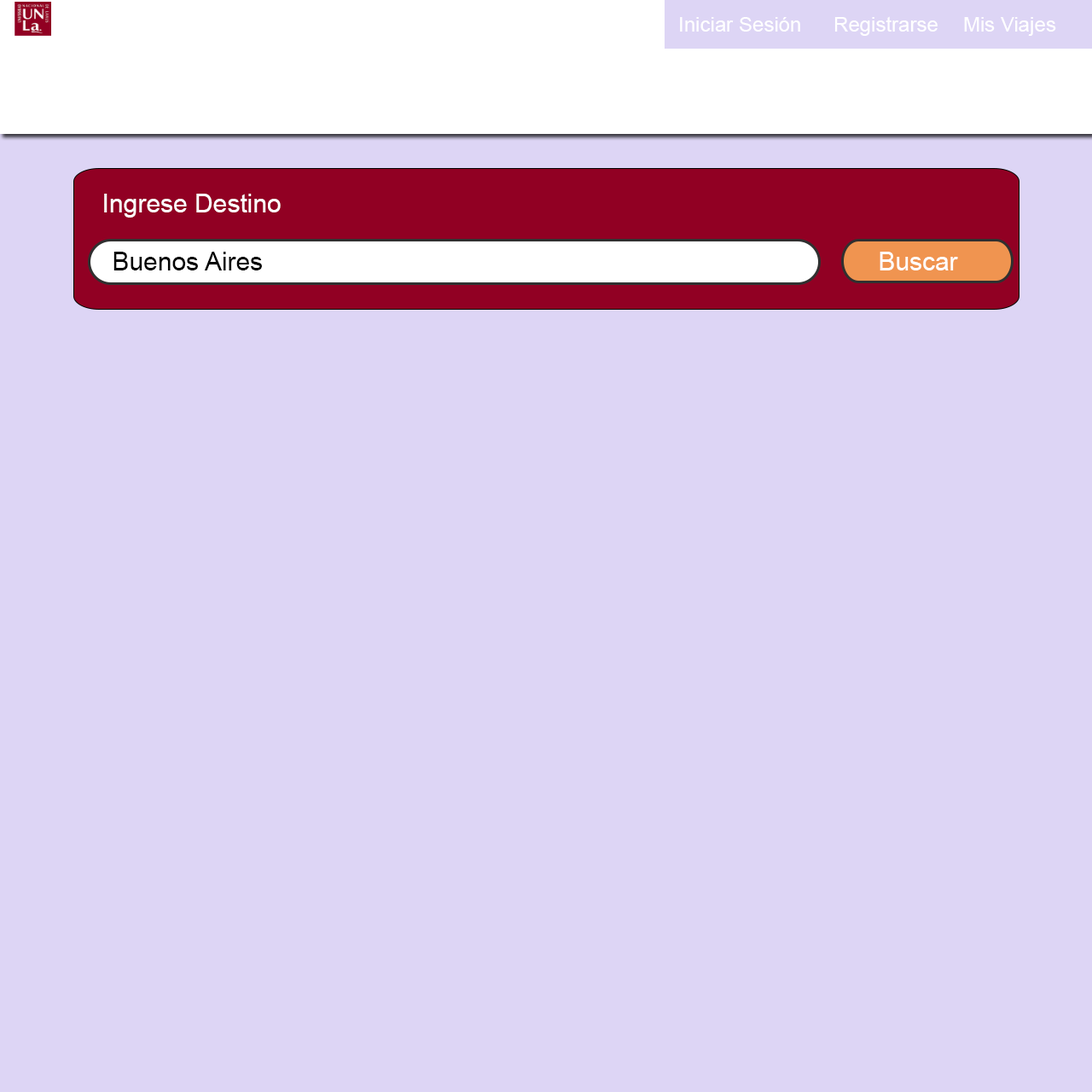
<style>
.page{position:relative;width:1092px;height:1092px;background:#ddd5f5}
.page>*{position:absolute;margin:0}
.t1{font:20.5px "ArialMT";color:#ffffff}
.t2{font:25.6px "ArialMT";color:#ffffff}
.t3{font:25.6px "ArialMT";color:#000000}
</style>
<div class="page">
<p class="t1" style="left:680px;top:17px;width:120px;height:15px">Iniciar Sesión</p>
<p class="t1" style="left:834px;top:16px;width:104px;height:20px">Registrarse</p>
<p class="t1" style="left:964px;top:17px;width:92px;height:19px">Mis Viajes</p>
<p class="t2" style="left:104px;top:194px;width:177px;height:24px">Ingrese Destino</p>
<p class="t3" style="left:113px;top:252px;width:149px;height:18px">Buenos Aires</p>
<p class="t2" style="left:880px;top:252px;width:78px;height:18px">Buscar</p>
</div>
